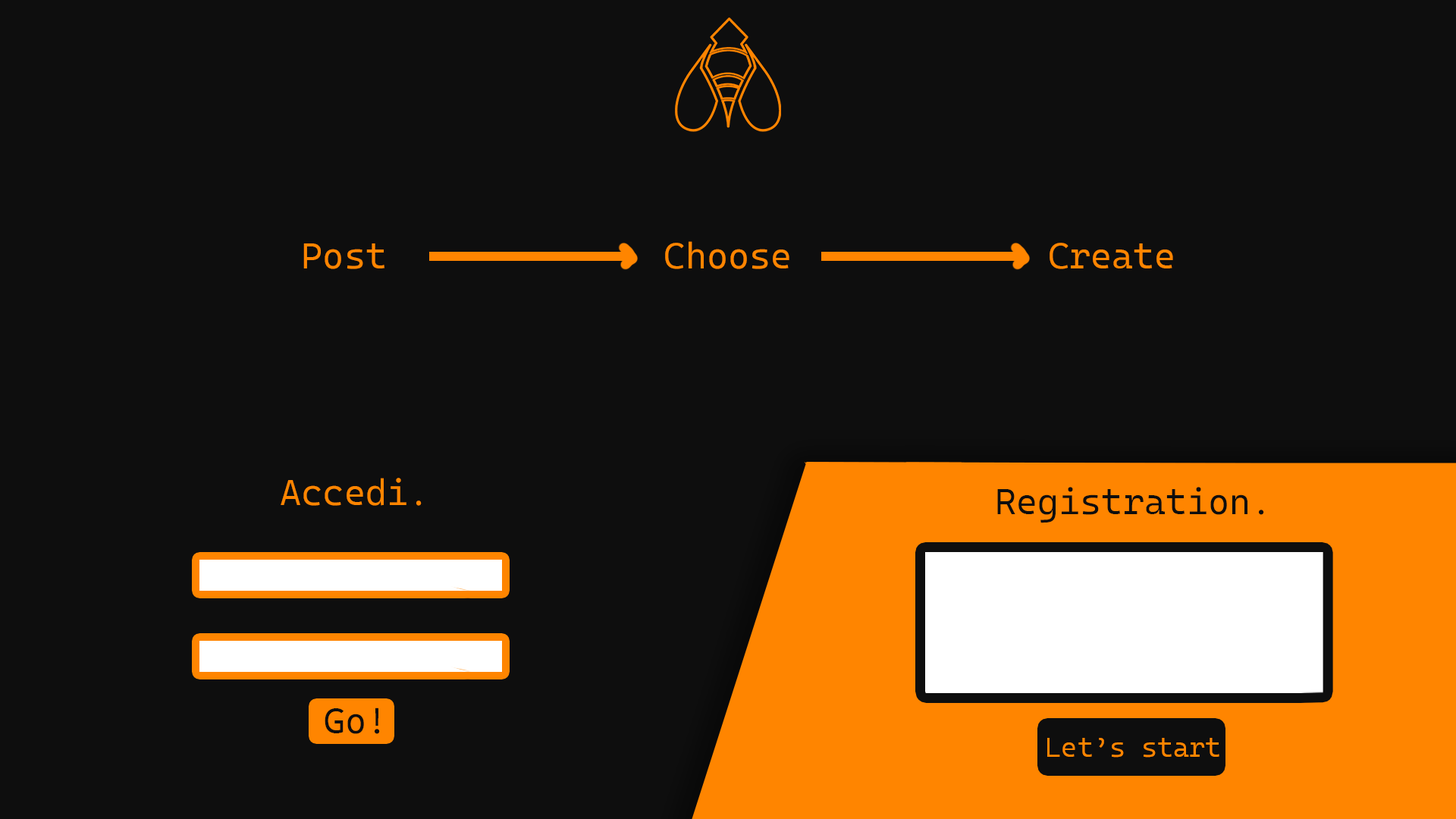
<style>
.page{position:relative;width:1456px;height:819px;background:#0e0e0e}
.page>*{position:absolute;margin:0}
.t1{font:36.4px "CascadiaCodeRoman-SemiLight";color:#ff8500}
.t2{font:36.4px "CascadiaCodeRoman-SemiLight";color:#0e0e0e}
.t3{font:27.3px "CascadiaCodeRoman-SemiLight";color:#ff8500}
</style>
<div class="page">
<p class="t1" style="left:303px;top:241px;width:870px;height:28px">Post             Choose            Create</p>
<p class="t1" style="left:281px;top:478px;width:141px;height:28px">Accedi.</p>
<p class="t2" style="left:997px;top:487px;width:267px;height:36px">Registration.</p>
<p class="t2" style="left:325px;top:708px;width:55px;height:26px">Go!</p>
<p class="t3" style="left:1047px;top:738px;width:172px;height:20px">Let’s start</p>
</div>
